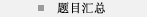
<style>
.page{position:relative;width:147px;height:17px;background:#f1f1f1}
.page>*{position:absolute;margin:0}
.t1{font:12px "SimSun";color:#000000;font-weight:bold}
</style>
<div class="page">
<p class="t1" style="left:57px;top:2px;width:48px;height:12px">题目汇总</p>
</div>
